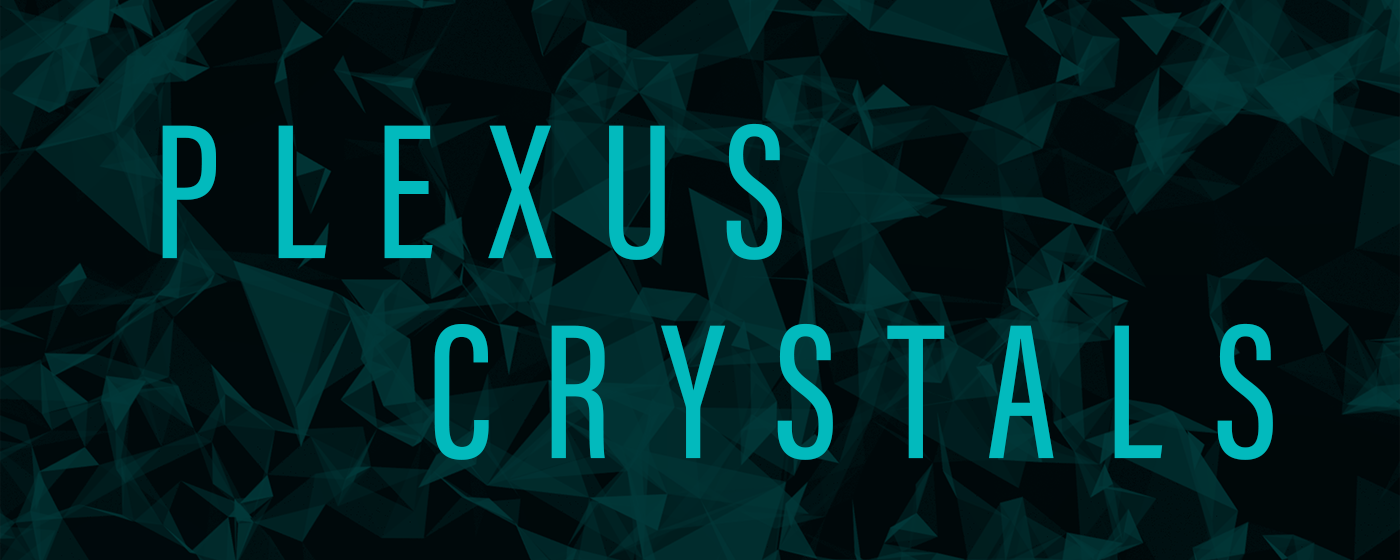
<style>
.page{position:relative;width:1400px;height:560px}
.page>*{position:absolute;margin:0}
.t1{font:197.9px/200px "AcuminConcept-ExtraCondensedMedium";letter-spacing:0.25em;color:#02babd}
</style>
<div class="page">
<p class="t1" style="left:162px;top:123px;width:1111px;height:337px">PLEXUS<br>    CRYSTALS</p>
</div>
